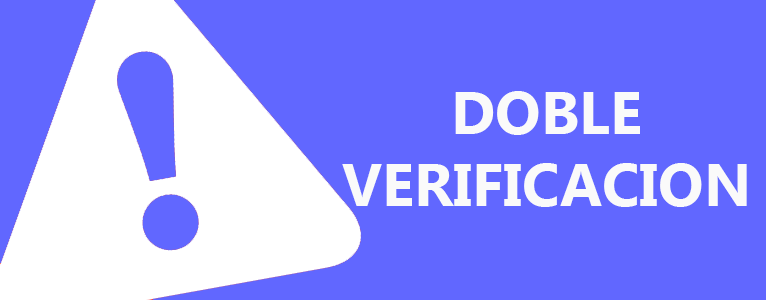
<style>
.page{position:relative;width:766px;height:300px;background:#6167ff}
.page>*{position:absolute;margin:0}
.t1{font:60px "MicrosoftTaiLe-Bold";color:#fafafa}
</style>
<div class="page">
<p class="t1" style="left:342px;top:91px;width:405px;height:116px;text-align:center">DOBLE           <br>VERIFICACION</p>
</div>
